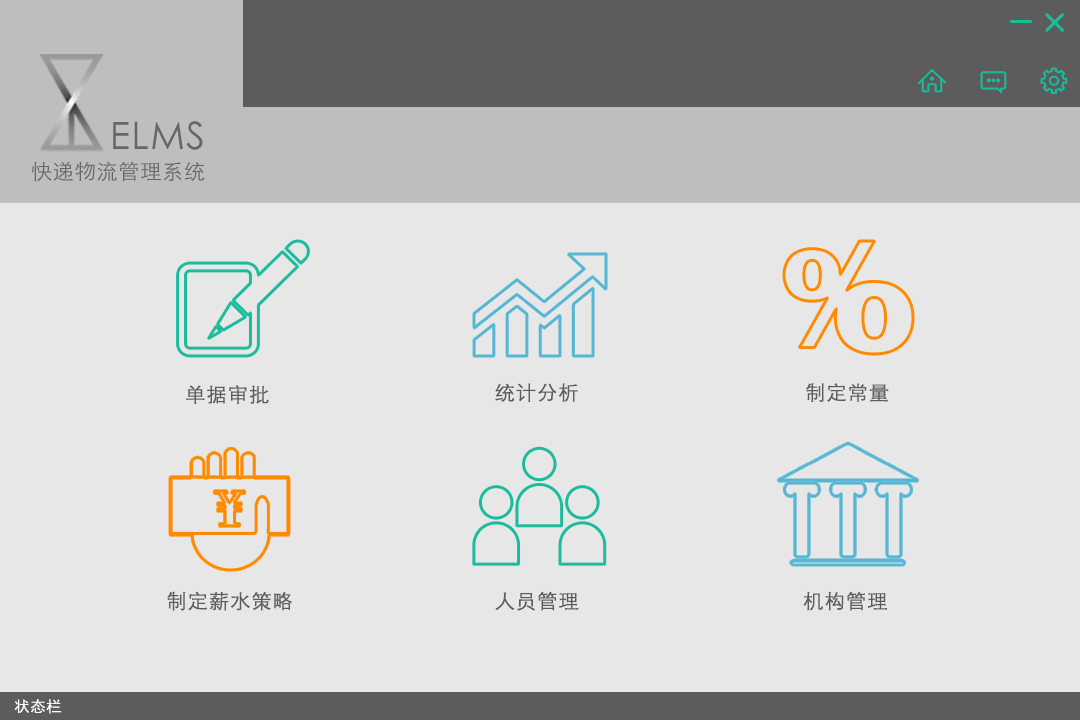
<style>
.page{position:relative;width:1080px;height:720px;background:#e7e7e7}
.page>*{position:absolute;margin:0}
.t1{font:20px "STXihei";letter-spacing:0.035em;color:#5c5c5c;font-weight:bold}
.t2{font:15px "STXihei";letter-spacing:0.035em;color:#ffffff;font-weight:bold}
</style>
<div class="page">
<p class="t1" style="left:186px;top:385px;width:83px;height:19px">单据审批</p>
<p class="t1" style="left:495px;top:383px;width:83px;height:19px">统计分析</p>
<p class="t1" style="left:806px;top:383px;width:83px;height:19px">制定常量</p>
<p class="t1" style="left:167px;top:591px;width:125px;height:20px">制定薪水策略</p>
<p class="t1" style="left:495px;top:591px;width:84px;height:20px">人员管理</p>
<p class="t1" style="left:803px;top:591px;width:84px;height:20px">机构管理</p>
<p class="t2" style="left:14px;top:699px;width:47px;height:15px">状态栏</p>
</div>
